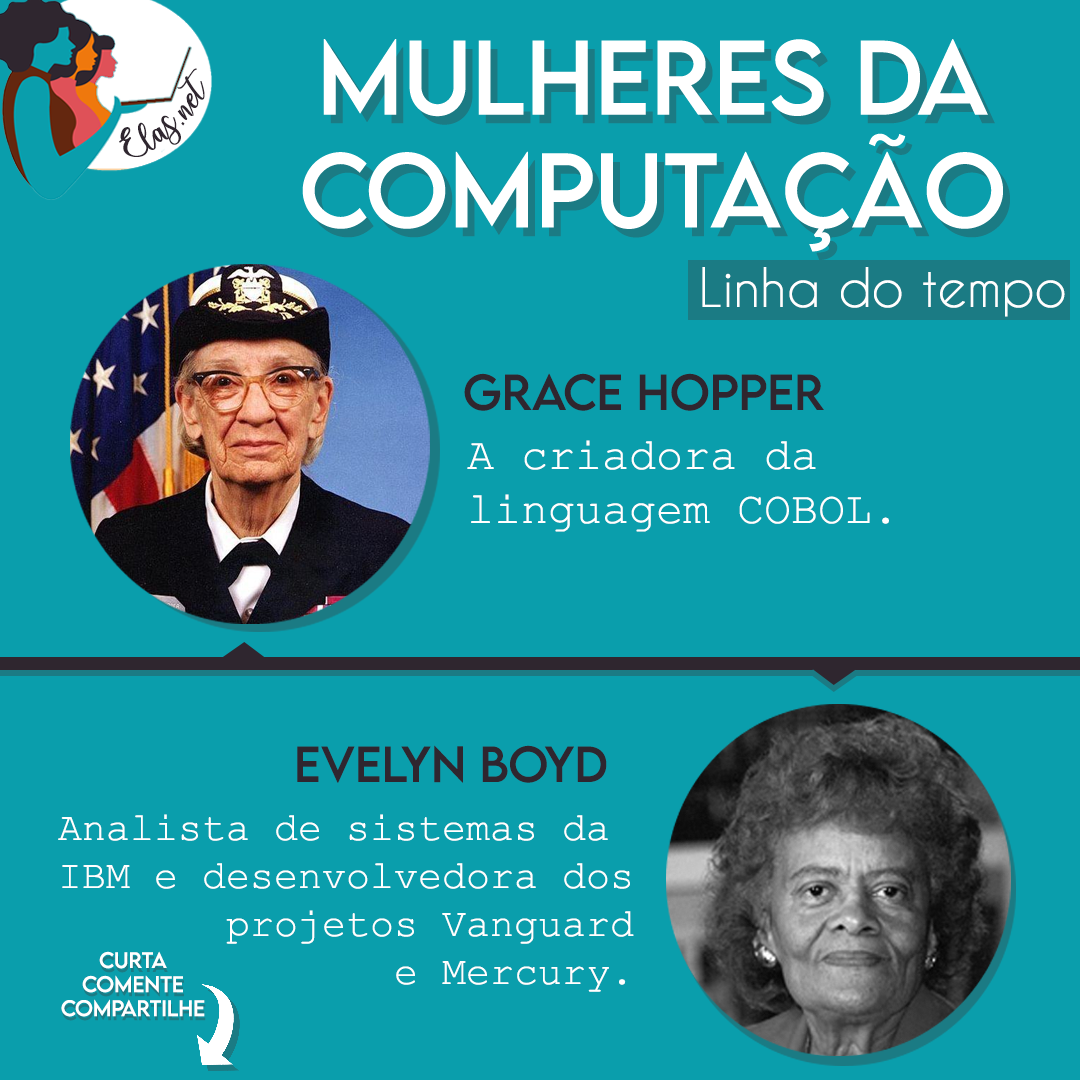
<style>
.page{position:relative;width:1080px;height:1080px;background:#0a9eac}
.page>*{position:absolute;margin:0}
.t1{font:25px "charlinda-Regular";color:#2f262f;scale:1.18 1}
.t2{font:51px "CaviarDreams";color:#ffffff}
.t3{font:45px "LEMONMILK-Regular";color:#2f262f}
.t4{font:45px "CourierNewPSMT";color:#ffffff}
.t5{font:40px "CourierNewPSMT";color:#ffffff}
.t6{font:20px "LEMONMILK-Regular";color:#ffffff}
</style>
<div class="page">
<p class="t1" style="left:119px;top:68px;width:86px;height:89px;rotate:-43deg">Elas.net</p>
<p class="t2" style="left:702px;top:267px;width:363px;height:50px">Linha do tempo</p>
<p class="t3" style="left:464px;top:373px;width:360px;height:38px">Grace Hopper</p>
<p class="t4" style="left:467px;top:440px;width:422px;height:92px">A criadora da <br>linguagem COBOL.</p>
<p class="t3" style="left:297px;top:745px;width:310px;height:38px">Evelyn Boyd</p>
<p class="t5" style="left:58px;top:814px;width:576px;height:178px;text-align:right">Analista de sistemas da <br>IBM e desenvolvedora dos<br>projetos Vanguard<br>e Mercury.</p>
<p class="t6" style="left:61px;top:951px;width:144px;height:66px;text-align:center">Curta<br>Comente<br>Compartilhe</p>
</div>
